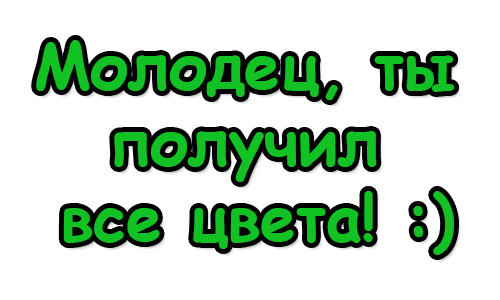
<style>
.page{position:relative;width:500px;height:300px;background:#ffffff}
.page>*{position:absolute;margin:0}
.t1{font:63.5px "ComicSansMS-Bold";color:#12c123}
</style>
<div class="page">
<p class="t1" style="left:36px;top:40px;width:419px;height:215px;text-align:center">Молодец, ты <br>получил <br>все цвета! :)</p>
</div>
